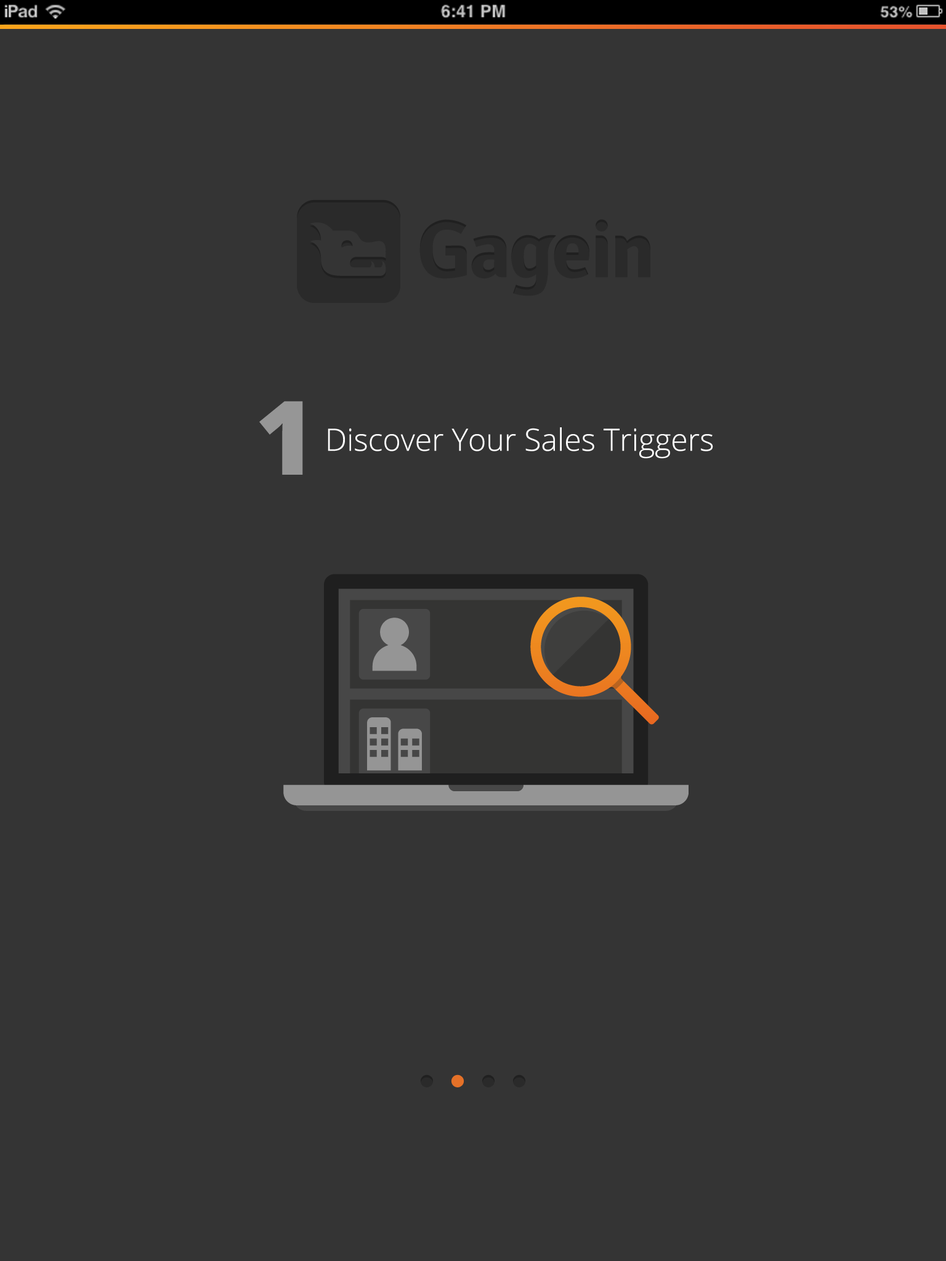
<style>
.page{position:relative;width:946px;height:1261px;background:#343434}
.page>*{position:absolute;margin:0}
.t1{font:102.6px "OpenSans-Extrabold";color:#969696}
.t2{font:30.8px "OpenSans-Light";color:#ffffff}
</style>
<div class="page">
<p class="t1" style="left:259px;top:401px;width:44px;height:74px">1</p>
<p class="t2" style="left:328px;top:427px;width:385px;height:32px">Discover Your Sales Triggers</p>
</div>
